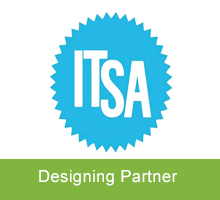
<style>
.page{position:relative;width:220px;height:200px;background:#ffffff}
.page>*{position:absolute;margin:0}
.t1{font:16.7px "ArialMT";letter-spacing:0.02em;color:#ffffff}
</style>
<div class="page">
<p class="t1" style="left:39px;top:170px;width:139px;height:16px">Designing Partner</p>
</div>
